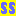
<style>
.page{position:relative;width:16px;height:16px;background:#ffff00}
.page>*{position:absolute;margin:0}
.t1{font:16px "GillSans-UltraBold";color:#6666ff;scale:0.71 1}
</style>
<div class="page">
<p class="t1" style="left:1px;top:2px;width:14px;height:12px">SS</p>
</div>
